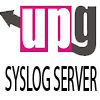
<style>
.page{position:relative;width:100px;height:100px;background:#ffffff}
.page>*{position:absolute;margin:0}
.t1{font:36.9px "MyriadPro-Regular";color:#000101;scale:0.38 1}
</style>
<div class="page">
<p class="t1" style="left:5px;top:66px;width:92px;height:25px">SYSLOG SERVER</p>
</div>
